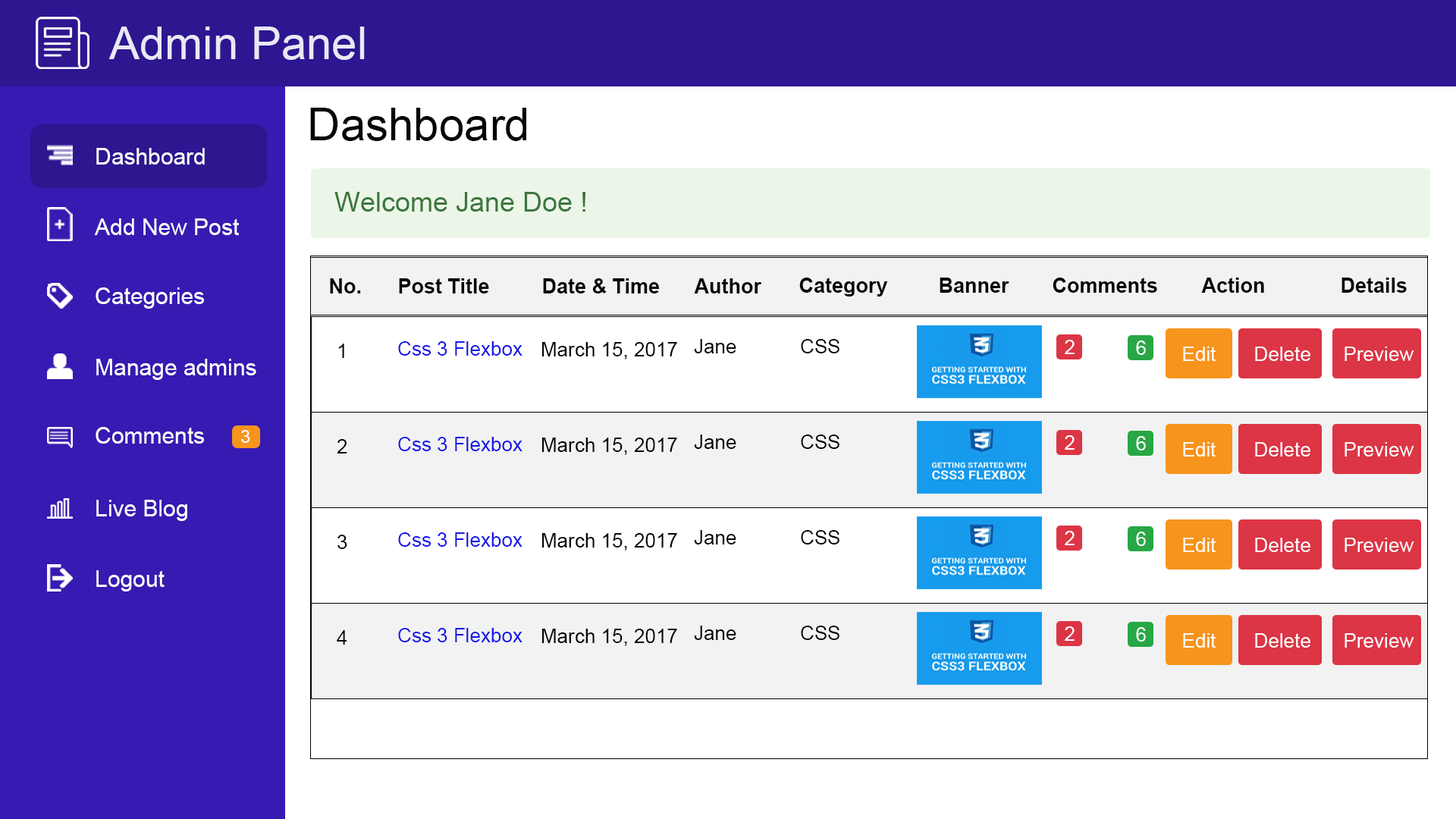
<style>
.page{position:relative;width:1456px;height:819px;background:#ffffff}
.page>*{position:absolute;margin:0}
.t1{font:45.5px "ArialMT";color:#eae8f4}
.t2{font:45.5px "ArialMT";color:#060606}
.t3{font:22.7px "ArialMT";color:#ffffff}
.t4{font:27.3px "ArialMT";color:#3c763d}
.t5{font:20.5px "Arial-BoldMT";color:#060606}
.t6{font:19.7px "ArialMT";color:#1717ea}
.t7{font:19.7px "ArialMT";color:#060606}
.t8{font:19.7px "ArialMT";color:#ffffff}
.t9{font:18.2px "ArialMT";color:#ffffff}
</style>
<div class="page">
<p class="t1" style="left:108px;top:27px;width:257px;height:33px">Admin Panel</p>
<p class="t2" style="left:310px;top:108px;width:216px;height:33px">Dashboard</p>
<p class="t3" style="left:96px;top:148px;width:109px;height:17px">Dashboard</p>
<p class="t4" style="left:334px;top:192px;width:251px;height:20px">Welcome Jane Doe !</p>
<p class="t3" style="left:94px;top:218px;width:145px;height:17px">Add New Post</p>
<p class="t5" style="left:330px;top:278px;width:31px;height:15px">No.</p>
<p class="t5" style="left:399px;top:278px;width:90px;height:15px">Post Title</p>
<p class="t5" style="left:543px;top:278px;width:116px;height:15px">Date &amp; Time</p>
<p class="t5" style="left:694px;top:278px;width:68px;height:15px">Author</p>
<p class="t5" style="left:799px;top:278px;width:89px;height:19px">Category</p>
<p class="t5" style="left:940px;top:278px;width:69px;height:15px">Banner</p>
<p class="t5" style="left:1053px;top:278px;width:104px;height:15px">Comments</p>
<p class="t5" style="left:1201px;top:278px;width:63px;height:15px">Action</p>
<p class="t5" style="left:1341px;top:278px;width:66px;height:15px">Details</p>
<p class="t3" style="left:96px;top:287px;width:108px;height:22px">Categories</p>
<p class="t6" style="left:398px;top:341px;width:124px;height:15px">Css 3 Flexbox</p>
<p class="t7" style="left:694px;top:339px;width:42px;height:14px">Jane Doe</p>
<p class="t7" style="left:801px;top:339px;width:38px;height:14px">CSS</p>
<p class="t8" style="left:1065px;top:340px;width:10px;height:14px">2</p>
<p class="t8" style="left:1136px;top:340px;width:10px;height:15px">6</p>
<p class="t7" style="left:338px;top:344px;width:6px;height:14px">1</p>
<p class="t7" style="left:541px;top:342px;width:136px;height:17px">March 15, 2017</p>
<p class="t8" style="left:1183px;top:347px;width:33px;height:14px">Edit</p>
<p class="t8" style="left:1255px;top:347px;width:55px;height:14px">Delete</p>
<p class="t8" style="left:1345px;top:347px;width:69px;height:14px">Preview</p>
<p class="t3" style="left:96px;top:359px;width:160px;height:21px">Manage admins</p>
<p class="t3" style="left:96px;top:427px;width:108px;height:17px">Comments</p>
<p class="t9" style="left:241px;top:430px;width:9px;height:13px">3</p>
<p class="t6" style="left:398px;top:437px;width:124px;height:14px">Css 3 Flexbox</p>
<p class="t7" style="left:541px;top:438px;width:136px;height:17px">March 15, 2017</p>
<p class="t7" style="left:694px;top:435px;width:42px;height:14px">Jane Doe</p>
<p class="t7" style="left:801px;top:435px;width:38px;height:14px">CSS</p>
<p class="t8" style="left:1065px;top:435px;width:10px;height:15px">2</p>
<p class="t8" style="left:1136px;top:436px;width:10px;height:14px">6</p>
<p class="t7" style="left:337px;top:439px;width:10px;height:14px">2</p>
<p class="t8" style="left:1183px;top:442px;width:33px;height:15px">Edit</p>
<p class="t8" style="left:1255px;top:442px;width:55px;height:15px">Delete</p>
<p class="t8" style="left:1345px;top:442px;width:69px;height:15px">Preview</p>
<p class="t3" style="left:96px;top:500px;width:91px;height:21px">Live Blog</p>
<p class="t6" style="left:398px;top:532px;width:124px;height:15px">Css 3 Flexbox</p>
<p class="t7" style="left:541px;top:533px;width:136px;height:18px">March 15, 2017</p>
<p class="t7" style="left:694px;top:530px;width:42px;height:14px">Jane Doe</p>
<p class="t7" style="left:801px;top:530px;width:38px;height:14px">CSS</p>
<p class="t8" style="left:1065px;top:531px;width:10px;height:14px">2</p>
<p class="t8" style="left:1136px;top:532px;width:10px;height:14px">6</p>
<p class="t7" style="left:337px;top:535px;width:10px;height:14px">3</p>
<p class="t8" style="left:1183px;top:538px;width:33px;height:14px">Edit</p>
<p class="t8" style="left:1255px;top:538px;width:55px;height:14px">Delete</p>
<p class="t8" style="left:1345px;top:538px;width:69px;height:14px">Preview</p>
<p class="t3" style="left:96px;top:570px;width:69px;height:21px">Logout</p>
<p class="t6" style="left:398px;top:628px;width:124px;height:14px">Css 3 Flexbox</p>
<p class="t7" style="left:541px;top:629px;width:136px;height:17px">March 15, 2017</p>
<p class="t7" style="left:694px;top:626px;width:42px;height:14px">Jane Doe</p>
<p class="t7" style="left:801px;top:626px;width:38px;height:14px">CSS</p>
<p class="t8" style="left:1065px;top:626px;width:10px;height:15px">2</p>
<p class="t8" style="left:1136px;top:627px;width:10px;height:15px">6</p>
<p class="t7" style="left:337px;top:630px;width:10px;height:15px">4</p>
<p class="t8" style="left:1183px;top:633px;width:33px;height:15px">Edit</p>
<p class="t8" style="left:1255px;top:633px;width:55px;height:15px">Delete</p>
<p class="t8" style="left:1345px;top:633px;width:69px;height:15px">Preview</p>
</div>
